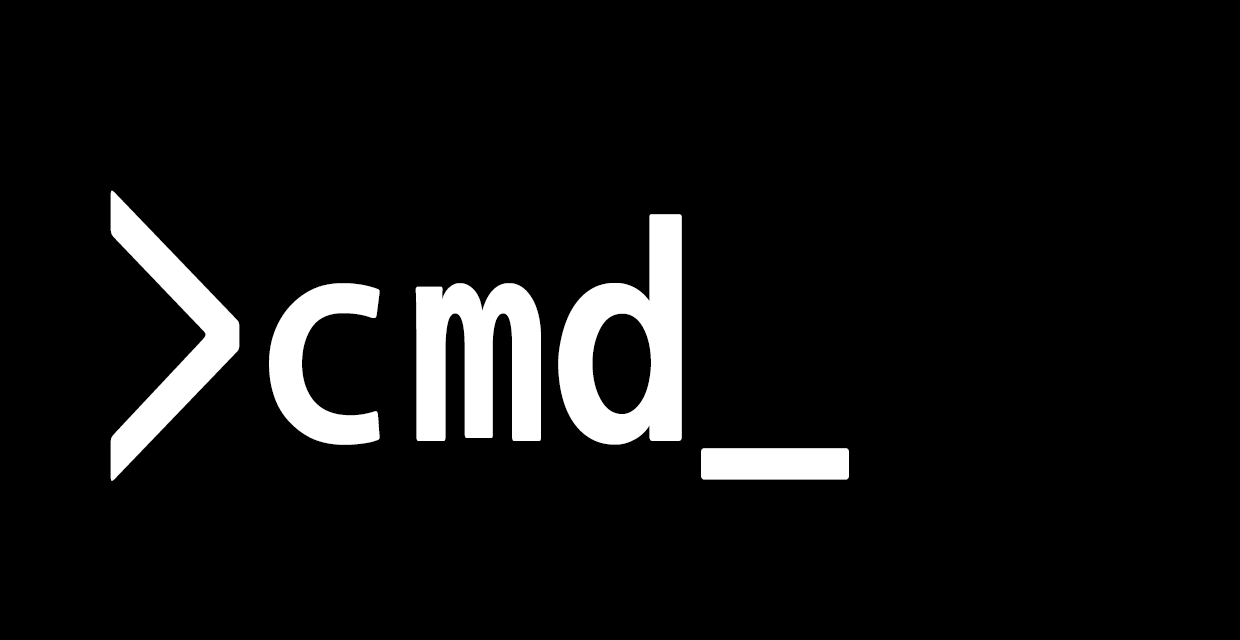
<style>
.page{position:relative;width:1240px;height:640px;background:#000000}
.page>*{position:absolute;margin:0}
.t1{font:300px "NanumGothicCoding-Bold";color:#ffffff}
</style>
<div class="page">
<p class="t1" style="left:110px;top:190px;width:739px;height:291px">&gt;cmd_</p>
</div>
